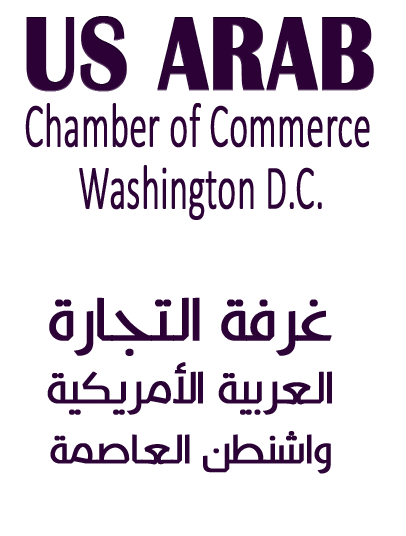
<style>
.page{position:relative;width:406px;height:536px;background:#ffffff}
.page>*{position:absolute;margin:0}
.t1{font:108px "BritannicBold";color:#2b0136;font-weight:bold;scale:0.82 1}
.t2{font:63px "Calibri-Light";color:#2b0136;font-weight:bold;scale:0.56 1}
.t3{font:43px/63px "KufyanArabic-Regular";color:#2b0136;font-weight:bold}
.t4{font:58px/66px "KufyanArabic-Regular";color:#2b0136;font-weight:bold}
.t5{font:39px/60px "KufyanArabic-Regular";color:#2b0136;font-weight:bold}
</style>
<div class="page">
<p class="t1" style="left:26px;top:16px;width:348px;height:76px">US ARAB</p>
<p class="t2" style="left:25px;top:103px;width:345px;height:45px">Chamber of Commerce</p>
<p class="t2" style="left:79px;top:165px;width:243px;height:55px">Washington D.C.</p>
<p class="t3" style="left:47px;top:297px;width:285px;height:177px;text-align:center"><span class="t4">غرفة التجارة<br></span>العربية الأمريكية<br><span class="t5">واشنطن العاصمة</span></p>
</div>
